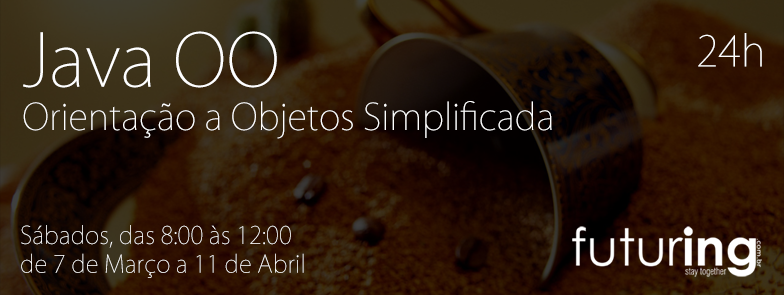
<style>
.page{position:relative;width:784px;height:295px}
.page>*{position:absolute;margin:0}
.t1{font:36px "KozGoPro-ExtraLight";color:#ffffff}
.t2{font:72px "KozGoPro-ExtraLight";color:#ffffff}
.t3{font:42px "KozGoPro-ExtraLight";color:#ffffff}
.t4{font:24px "KozGoPro-ExtraLight";color:#ffffff}
</style>
<div class="page">
<p class="t1" style="left:23px;top:31px;width:529px;height:108px"><span class="t2">Java OO<br></span>Orientação a Objetos Simplificada</p>
<p class="t3" style="left:698px;top:33px;width:64px;height:34px">24h</p>
<p class="t4" style="left:21px;top:225px;width:283px;height:53px">Sábados, das 8:00 às 12:00<br>de 7 de Março a 11 de Abril</p>
</div>
